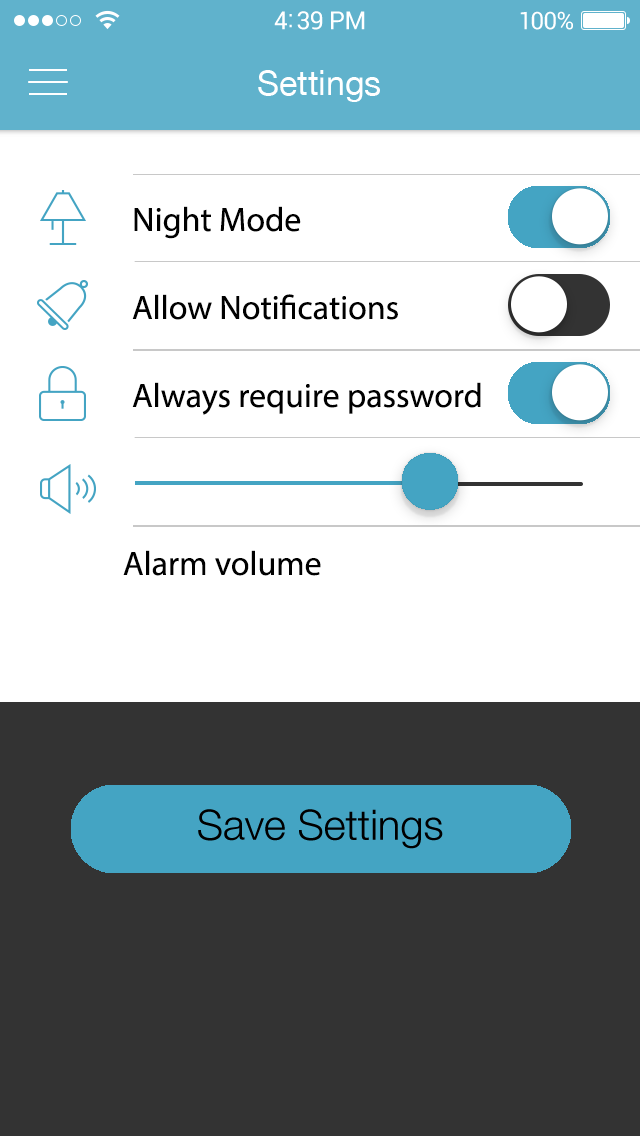
<style>
.page{position:relative;width:640px;height:1136px;background:#ffffff}
.page>*{position:absolute;margin:0}
.t1{font:25px "Roboto-Regular";letter-spacing:-0.02em;color:#ffffff}
.t2{font:24px "Roboto-Regular";letter-spacing:-0.02em;color:#ffffff}
.t3{font:34px "HelveticaNeue";color:#ffffff}
.t4{font:34px/88px "MyriadPro-Regular";color:#000000}
.t5{font:34px "MyriadPro-Regular";color:#000000}
.t6{font:41.9px "HelveticaNeue-Light";color:#000000}
</style>
<div class="page">
<p class="t1" style="left:274px;top:11px;width:91px;height:19px">4:39 PM</p>
<p class="t2" style="left:520px;top:11px;width:53px;height:19px">100%</p>
<p class="t3" style="left:258px;top:70px;width:122px;height:32px">Settings</p>
<p class="t4" style="left:132px;top:206px;width:266px;height:114px">Night Mode<br>Allow Notifications</p>
<p class="t5" style="left:132px;top:382px;width:349px;height:33px">Always require password</p>
<p class="t5" style="left:123px;top:550px;width:198px;height:26px">Alarm volume</p>
<p class="t6" style="left:198px;top:809px;width:245px;height:40px">Save Settings</p>
</div>
